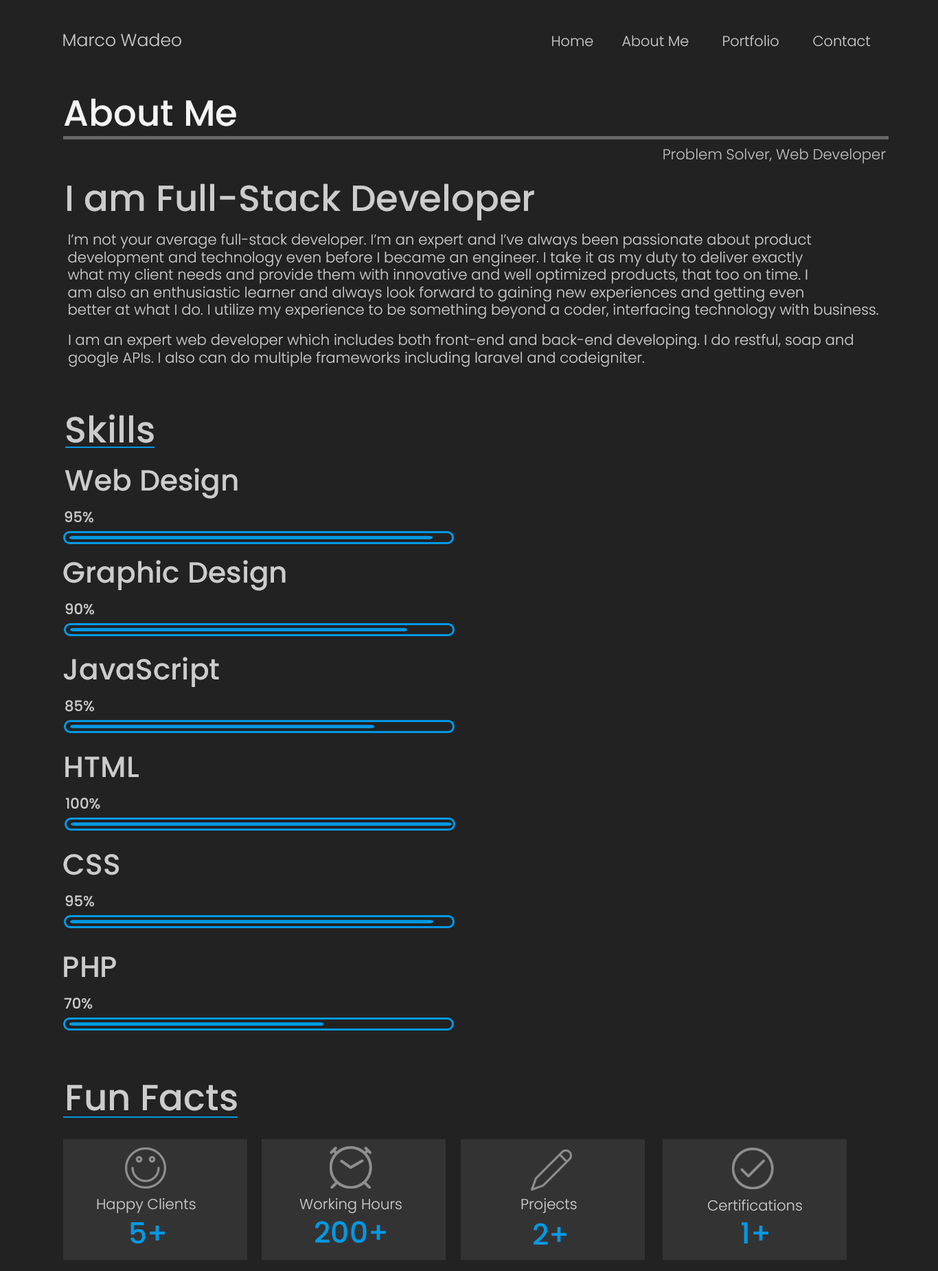
<style>
.page{position:relative;width:938px;height:1271px;background:#222222}
.page>*{position:absolute;margin:0}
.t1{font:36.3px "Poppins-Medium";color:#f5f5f5}
.t2{font:14.5px "Poppins-Light";color:#bbbbbb}
.t3{font:36.3px "Poppins-Medium";color:#cccccc}
.t4{font:14.5px "Poppins-Light";color:#cccccc}
.t5{font:29.1px "Poppins-Medium";color:#cccccc}
.t6{font:14.5px "Poppins-Medium";color:#cccccc}
.t7{font:29.1px "Poppins-Medium";color:#0099e5}
</style>
<div class="page">
<p class="t1" style="left:64px;top:98px;width:172px;height:28px">About Me</p>
<p class="t2" style="left:664px;top:148px;width:222px;height:15px">Problem Solver, Web Developer</p>
<p class="t3" style="left:67px;top:183px;width:467px;height:38px">I am Full-Stack Developer</p>
<p class="t4" style="left:67px;top:234px;width:812px;height:85px">I’m not your average full-stack developer. I’m an expert and I’ve always been passionate about product <br>development and technology even before I became an engineer. I take it as my duty to deliver exactly <br>what my client needs and provide them with innovative and well optimized products, that too on time. I<br>am also an enthusiastic learner and always look forward to gaining new experiences and getting even <br>better at what I do. I utilize my experience to be something beyond a coder, interfacing technology with business.</p>
<p class="t4" style="left:69px;top:334px;width:784px;height:33px">I am an expert web developer which includes both front-end and back-end developing. I do restful, soap and <br>google APIs. I also can do multiple frameworks including laravel and codeigniter.</p>
<p class="t3" style="left:67px;top:414px;width:87px;height:29px">Skills</p>
<p class="t5" style="left:65px;top:468px;width:173px;height:31px">Web Design</p>
<p class="t6" style="left:65px;top:511px;width:28px;height:12px">95%</p>
<p class="t5" style="left:63px;top:560px;width:223px;height:31px">Graphic Design</p>
<p class="t6" style="left:65px;top:603px;width:29px;height:12px">90%</p>
<p class="t5" style="left:63px;top:657px;width:156px;height:30px">JavaScript</p>
<p class="t6" style="left:65px;top:700px;width:29px;height:12px">85%</p>
<p class="t5" style="left:65px;top:756px;width:74px;height:21px">HTML</p>
<p class="t6" style="left:66px;top:798px;width:34px;height:11px">100%</p>
<p class="t5" style="left:63px;top:854px;width:56px;height:21px">CSS</p>
<p class="t6" style="left:65px;top:895px;width:29px;height:12px">95%</p>
<p class="t5" style="left:64px;top:956px;width:52px;height:21px">PHP</p>
<p class="t6" style="left:64px;top:997px;width:29px;height:12px">70%</p>
<p class="t3" style="left:67px;top:1085px;width:170px;height:26px">Fun Facts</p>
<p class="t4" style="left:97px;top:1198px;width:99px;height:15px">Happy Clients</p>
<p class="t4" style="left:299px;top:1198px;width:103px;height:15px">Working Hours</p>
<p class="t4" style="left:521px;top:1198px;width:56px;height:15px">Projects</p>
<p class="t4" style="left:708px;top:1199px;width:94px;height:12px">Certifications</p>
<p class="t7" style="left:131px;top:1222px;width:34px;height:21px">5+</p>
<p class="t7" style="left:315px;top:1221px;width:71px;height:22px">200+</p>
<p class="t7" style="left:534px;top:1223px;width:33px;height:22px">2+</p>
<p class="t7" style="left:742px;top:1222px;width:27px;height:21px">1+</p>
</div>
